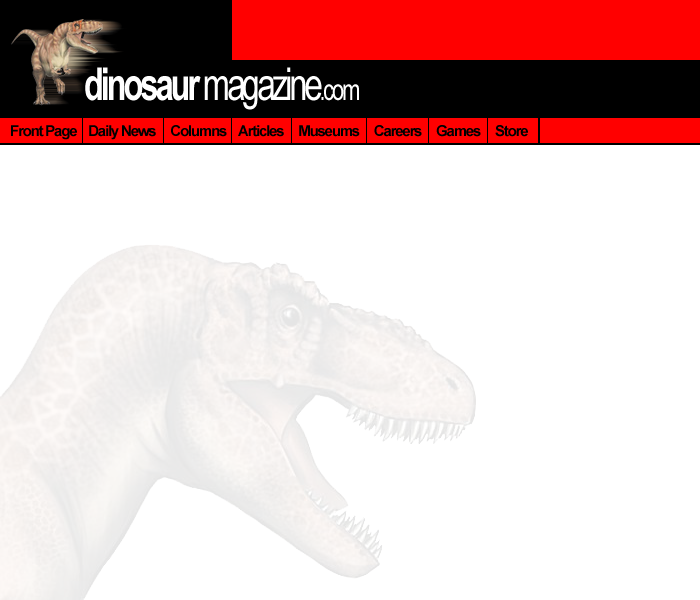
<style>
.page{position:relative;width:700px;height:600px;background:#ffffff}
.page>*{position:absolute;margin:0}
.t1{font:45.6px "ArialNarrow-Bold";letter-spacing:-0.08em;color:#ffffff;scale:0.88 1}
.t2{font:45.6px "ArialNarrow";letter-spacing:-0.08em;color:#ffffff;scale:0.88 1}
.t3{font:30px "ArialNarrow";letter-spacing:-0.08em;color:#ffffff;scale:0.88 1}
.t4{font:15px "Arial-BoldMT";letter-spacing:-0.08em;color:#000000}
</style>
<div class="page">
<p class="t1" style="left:85px;top:67px;width:274px;height:43px">dinosaur <span class="t2">magazine</span><span class="t3">.com</span></p>
<p class="t4" style="left:11px;top:125px;width:517px;height:15px">Front Page    Daily News     Columns    Articles     Museums     Careers     Games     Store</p>
</div>
